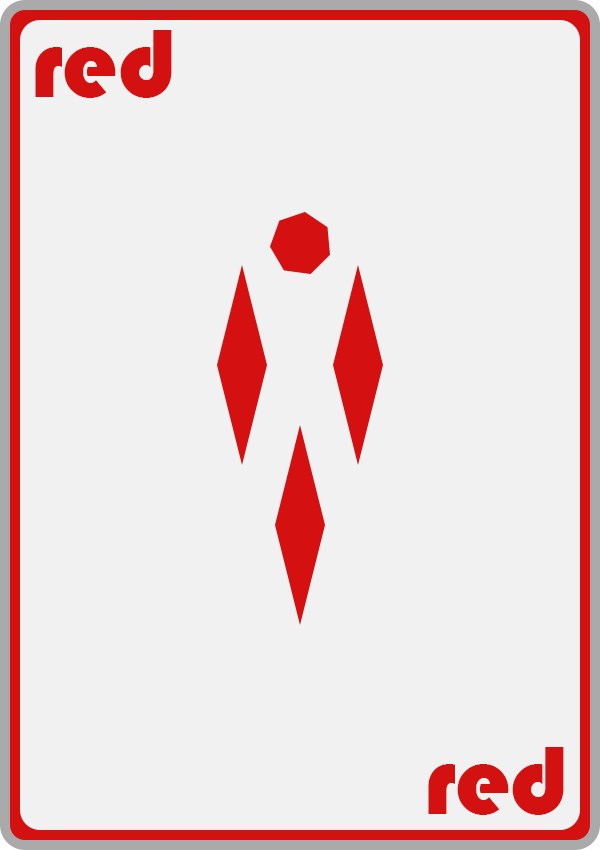
<style>
.page{position:relative;width:600px;height:850px;background:#f1f1f1}
.page>*{position:absolute;margin:0}
.t1{font:100px "Bauhaus93";color:#d41111}
</style>
<div class="page">
<p class="t1" style="left:35px;top:30px;width:137px;height:68px">red</p>
<p class="t1" style="left:428px;top:747px;width:136px;height:68px">red</p>
</div>
